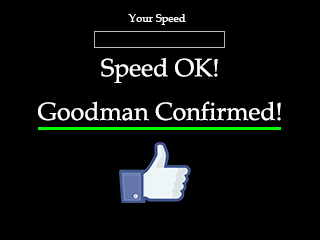
<style>
.page{position:relative;width:320px;height:240px;background:#000000}
.page>*{position:absolute;margin:0}
.t1{font:11px "BookAntiqua";color:#ffffff}
.t2{font:25px "BookAntiqua";color:#ffffff}
</style>
<div class="page">
<p class="t1" style="left:128px;top:14px;width:58px;height:11px">Your Speed</p>
<p class="t2" style="left:38px;top:58px;width:243px;height:63px;text-align:center">Speed OK!<br>Goodman Confirmed!</p>
</div>
